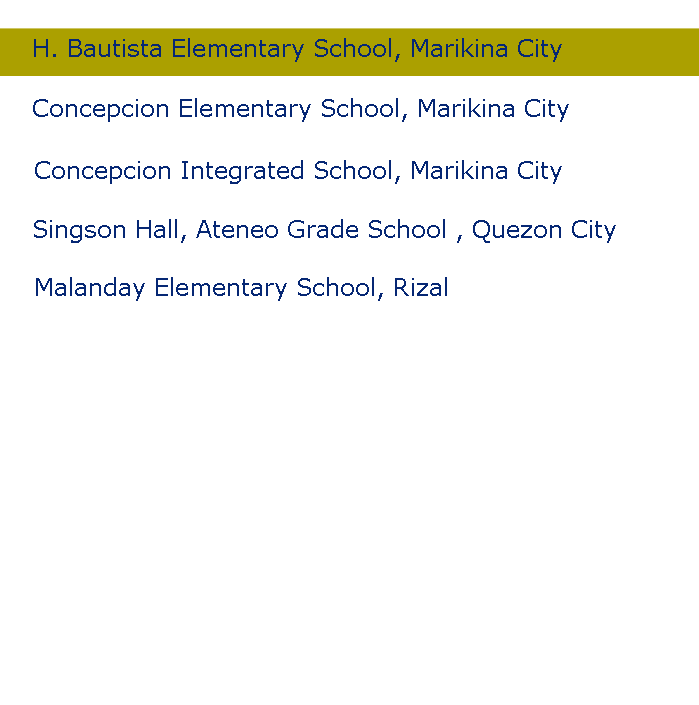
<style>
.page{position:relative;width:699px;height:705px;background:#ffffff}
.page>*{position:absolute;margin:0}
.t1{font:24px "Verdana";color:#062774}
</style>
<div class="page">
<p class="t1" style="left:34px;top:38px;width:528px;height:24px">H. Bautista Elementary School, Marikina City</p>
<p class="t1" style="left:33px;top:98px;width:536px;height:24px">Concepcion Elementary School, Marikina City</p>
<p class="t1" style="left:35px;top:160px;width:527px;height:24px">Concepcion Integrated School, Marikina City</p>
<p class="t1" style="left:34px;top:219px;width:582px;height:24px">Singson Hall, Ateneo Grade School , Quezon City</p>
<p class="t1" style="left:36px;top:277px;width:411px;height:24px">Malanday Elementary School, Rizal</p>
</div>
